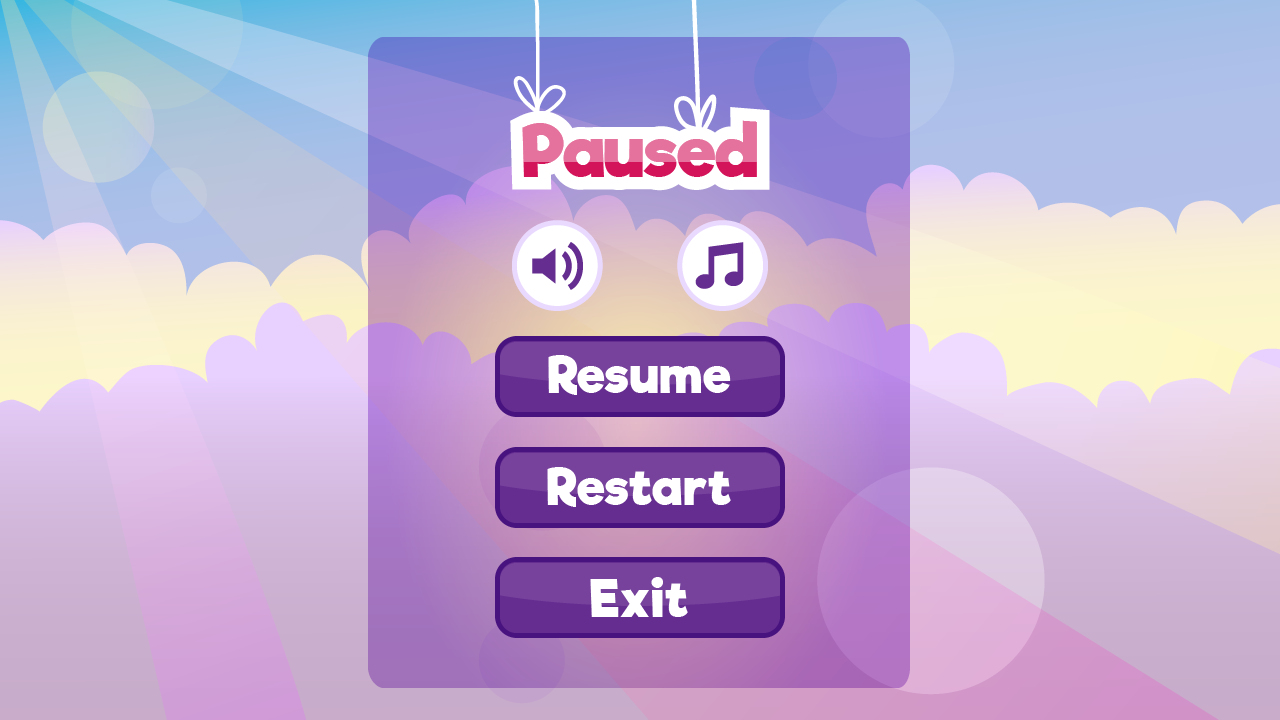
<style>
.page{position:relative;width:1280px;height:720px}
.page>*{position:absolute;margin:0}
.t1{font:70px "RifficFree-Bold"}
.t2{font:50.1px "RifficFree-Bold";letter-spacing:0.025em;color:#ffffff}
</style>
<div class="page">
<p class="t1" style="left:522px;top:120px;width:235px;height:57px">Paused</p>
<p class="t1" style="left:522px;top:120px;width:235px;height:57px">Paused</p>
<p class="t2" style="left:548px;top:355px;width:183px;height:40px">Resume</p>
<p class="t2" style="left:547px;top:467px;width:184px;height:40px">Restart</p>
<p class="t2" style="left:590px;top:577px;width:98px;height:40px">Exit</p>
</div>
